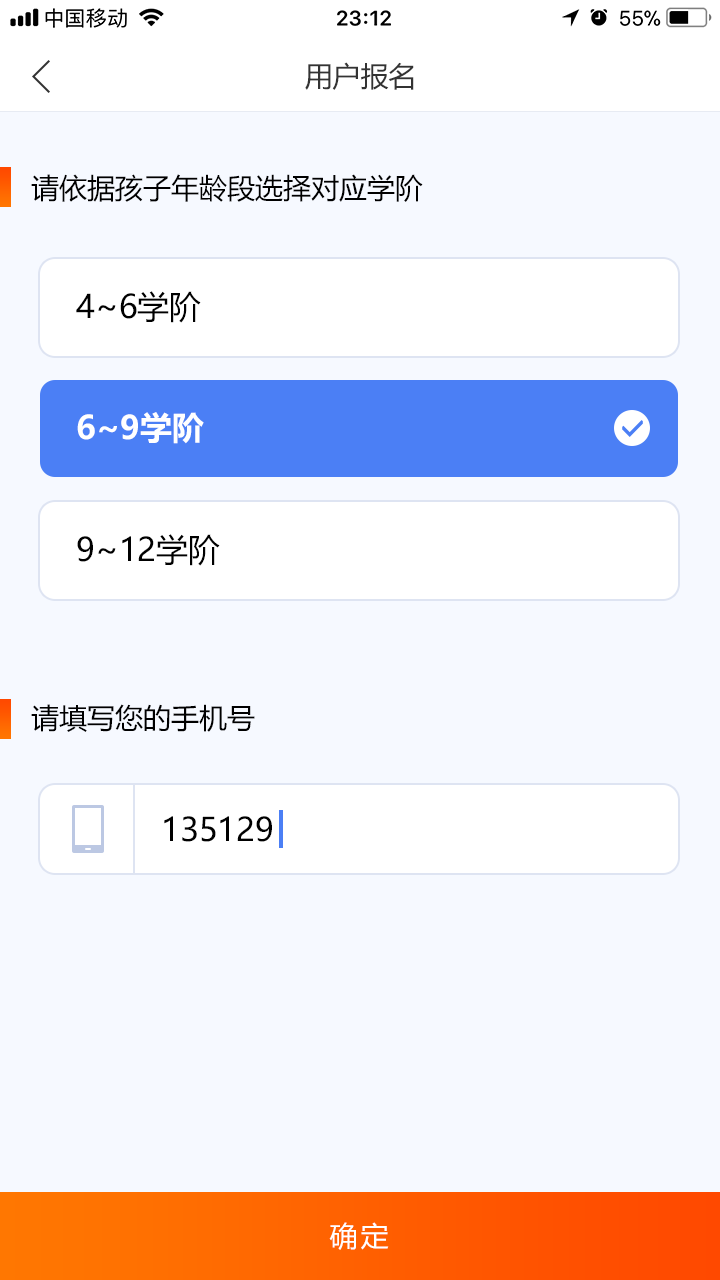
<style>
.page{position:relative;width:720px;height:1280px;background:#f6f9ff}
.page>*{position:absolute;margin:0}
.t1{font:28px "MicrosoftYaHei";color:#333333}
.t2{font:28px "MicrosoftYaHei";color:#000000}
.t3{font:32px "MicrosoftYaHei";color:#000000}
.t4{font:32px "MicrosoftYaHei-Bold";color:#ffffff}
.t5{font:28px "MicrosoftYaHei";letter-spacing:0.1em;color:#ffffff}
</style>
<div class="page">
<p class="t1" style="left:305px;top:62px;width:109px;height:28px">用户报名</p>
<p class="t2" style="left:31px;top:174px;width:392px;height:28px">请依据孩子年龄段选择对应学阶</p>
<p class="t3" style="left:76px;top:291px;width:125px;height:32px">4~6学阶</p>
<p class="t4" style="left:77px;top:412px;width:127px;height:32px">6~9学阶</p>
<p class="t3" style="left:77px;top:534px;width:143px;height:32px">9~12学阶</p>
<p class="t2" style="left:31px;top:704px;width:224px;height:28px">请填写您的手机号</p>
<p class="t3" style="left:164px;top:816px;width:108px;height:26px">135129</p>
<p class="t5" style="left:329px;top:1222px;width:60px;height:28px">确定</p>
</div>
